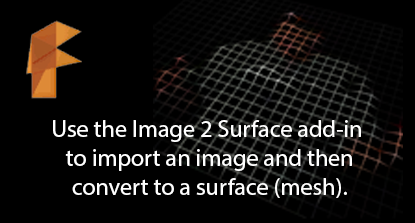
<style>
.page{position:relative;width:415px;height:223px;background:#000000}
.page>*{position:absolute;margin:0}
.t1{font:24px "MyriadPro-Regular";color:#ffffff}
</style>
<div class="page">
<p class="t1" style="left:53px;top:120px;width:308px;height:78px;text-align:center">Use the Image 2 Surface add-in<br> to import an image and then<br> convert to a surface (mesh).</p>
</div>
